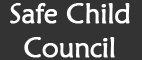
<style>
.page{position:relative;width:142px;height:60px;background:#333333}
.page>*{position:absolute;margin:0}
.t1{font:28px "MaiandraGD-Regular";letter-spacing:-0.025em;color:#ffffff;font-weight:bold}
</style>
<div class="page">
<p class="t1" style="left:10px;top:3px;width:120px;height:55px;text-align:center">Safe Child<br>Council</p>
</div>
